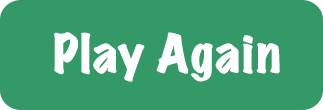
<style>
.page{position:relative;width:323px;height:110px;background:#339966}
.page>*{position:absolute;margin:0}
.t1{font:48px "MarkerFelt-Wide";color:#ffffff}
</style>
<div class="page">
<p class="t1" style="left:54px;top:32px;width:226px;height:50px">Play Again</p>
</div>
